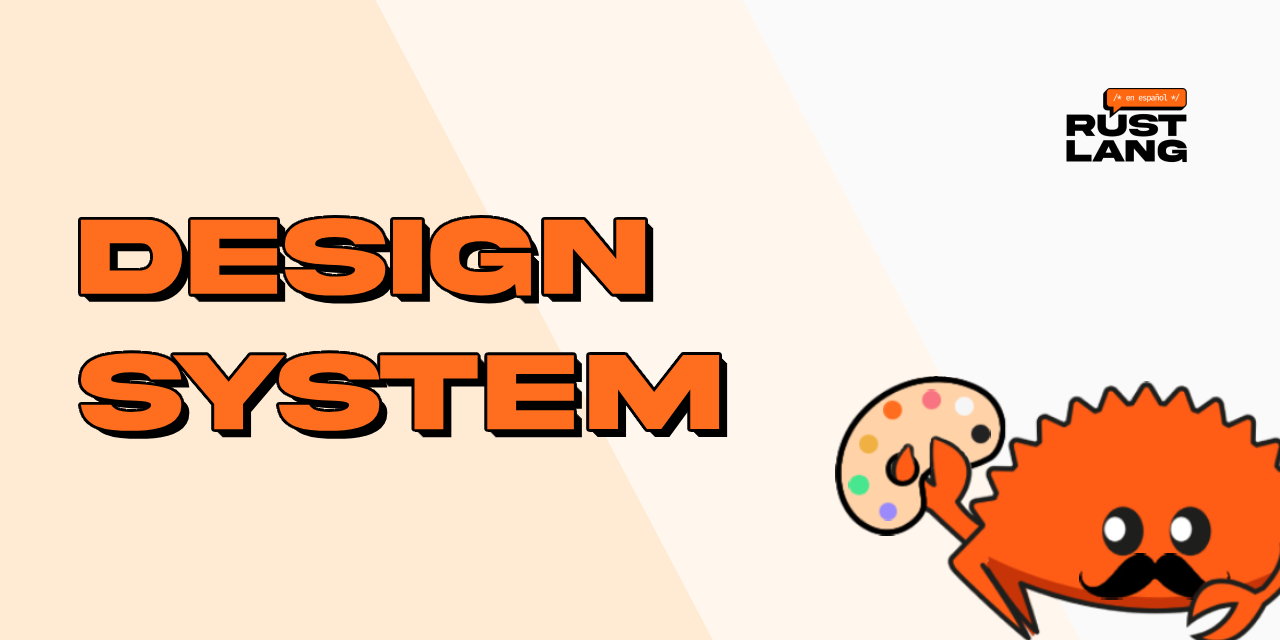
<style>
.page{position:relative;width:1280px;height:640px;background:#ffebd4}
.page>*{position:absolute;margin:0}
.t1{font:112.8px "AkiraExpanded-SuperBold";color:#ff6e1f}
</style>
<div class="page">
<p class="t1" style="left:80px;top:217px;width:640px;height:214px">DESIGN<br>SYSTEM</p>
</div>
